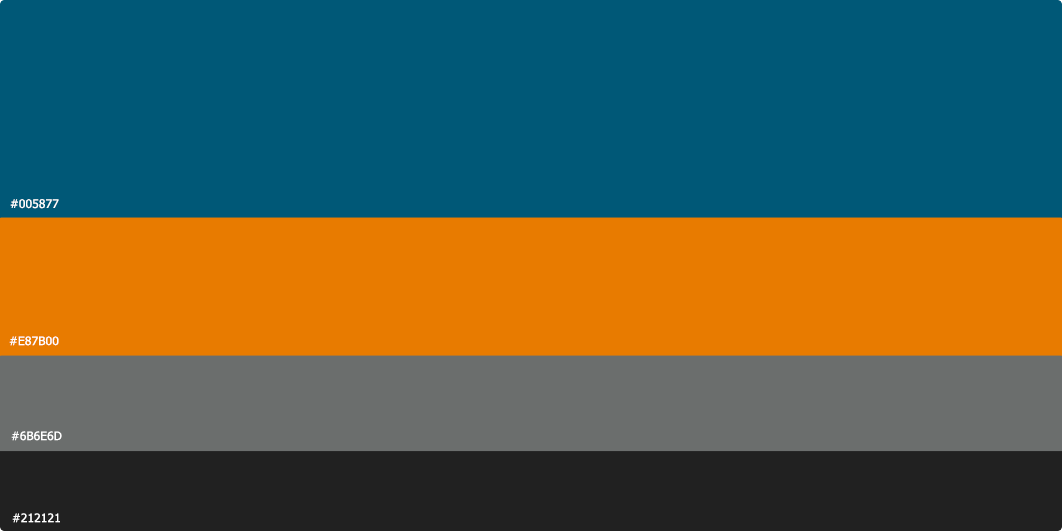
<style>
.page{position:relative;width:1062px;height:531px;background:#005877}
.page>*{position:absolute;margin:0}
.t1{font:12px "Tahoma";letter-spacing:0.01em;color:#ffffff;text-transform:uppercase}
.t2{font:11.7px "Tahoma";letter-spacing:0.01em;color:#ffffff;text-transform:uppercase;scale:1.03 1}
.t3{font:11.7px "Tahoma";letter-spacing:0.01em;color:#ffffff;text-transform:uppercase}
</style>
<div class="page">
<p class="t1" style="left:10px;top:199px;width:49px;height:10px">#005877</p>
<p class="t2" style="left:9px;top:336px;width:50px;height:10px">#e87b00</p>
<p class="t3" style="left:11px;top:431px;width:51px;height:10px">#6b6e6d</p>
<p class="t3" style="left:12px;top:513px;width:48px;height:10px">#212121</p>
</div>
